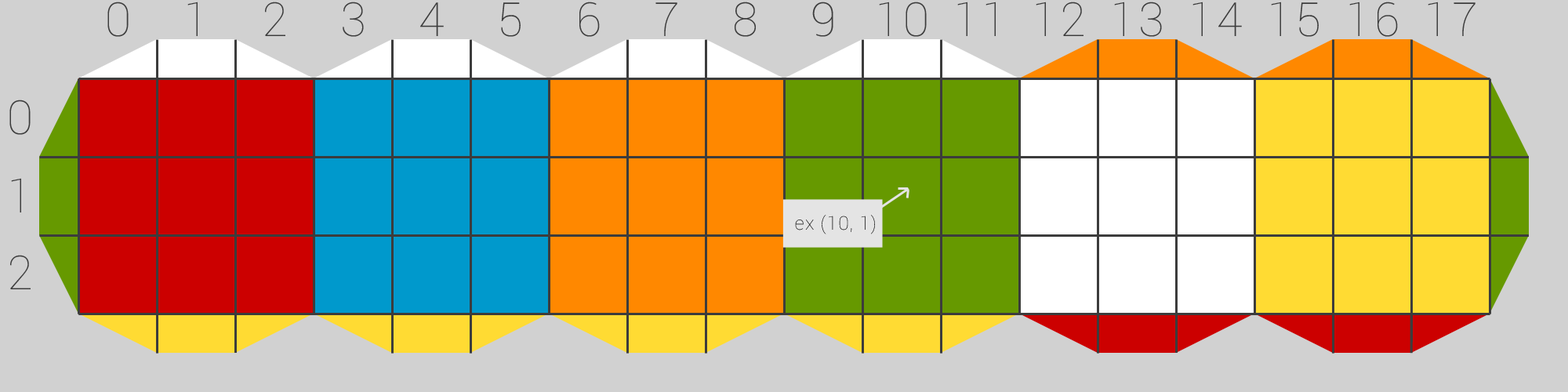
<style>
.page{position:relative;width:1568px;height:392px;background:#d1d1d1}
.page>*{position:absolute;margin:0}
.t1{font:47px "Roboto-Thin";letter-spacing:0.05em;color:#3c3c3c}
.t2{font:18.8px "Roboto-Thin";letter-spacing:0.05em}
</style>
<div class="page">
<p class="t1" style="left:107px;top:2px;width:22px;height:35px">0</p>
<p class="t1" style="left:187px;top:2px;width:11px;height:34px">1</p>
<p class="t1" style="left:265px;top:2px;width:20px;height:34px">2</p>
<p class="t1" style="left:343px;top:2px;width:21px;height:35px">3</p>
<p class="t1" style="left:420px;top:2px;width:24px;height:34px">4</p>
<p class="t1" style="left:501px;top:2px;width:20px;height:35px">5</p>
<p class="t1" style="left:579px;top:2px;width:21px;height:35px">6</p>
<p class="t1" style="left:655px;top:2px;width:22px;height:34px">7</p>
<p class="t1" style="left:734px;top:2px;width:22px;height:35px">8</p>
<p class="t1" style="left:812px;top:2px;width:21px;height:35px">9</p>
<p class="t1" style="left:879px;top:2px;width:48px;height:35px">10</p>
<p class="t1" style="left:957px;top:2px;width:39px;height:34px">11</p>
<p class="t1" style="left:1036px;top:2px;width:47px;height:34px">12</p>
<p class="t1" style="left:1114px;top:2px;width:48px;height:35px">13</p>
<p class="t1" style="left:1192px;top:2px;width:50px;height:34px">14</p>
<p class="t1" style="left:1271px;top:2px;width:48px;height:35px">15</p>
<p class="t1" style="left:1349px;top:2px;width:49px;height:35px">16</p>
<p class="t1" style="left:1428px;top:2px;width:47px;height:34px">17</p>
<p class="t1" style="left:9px;top:100px;width:22px;height:35px">0</p>
<p class="t1" style="left:11px;top:178px;width:10px;height:34px">1</p>
<p class="t2" style="left:795px;top:215px;width:80px;height:19px">ex (10, 1)</p>
<p class="t1" style="left:10px;top:255px;width:21px;height:34px">2</p>
</div>
